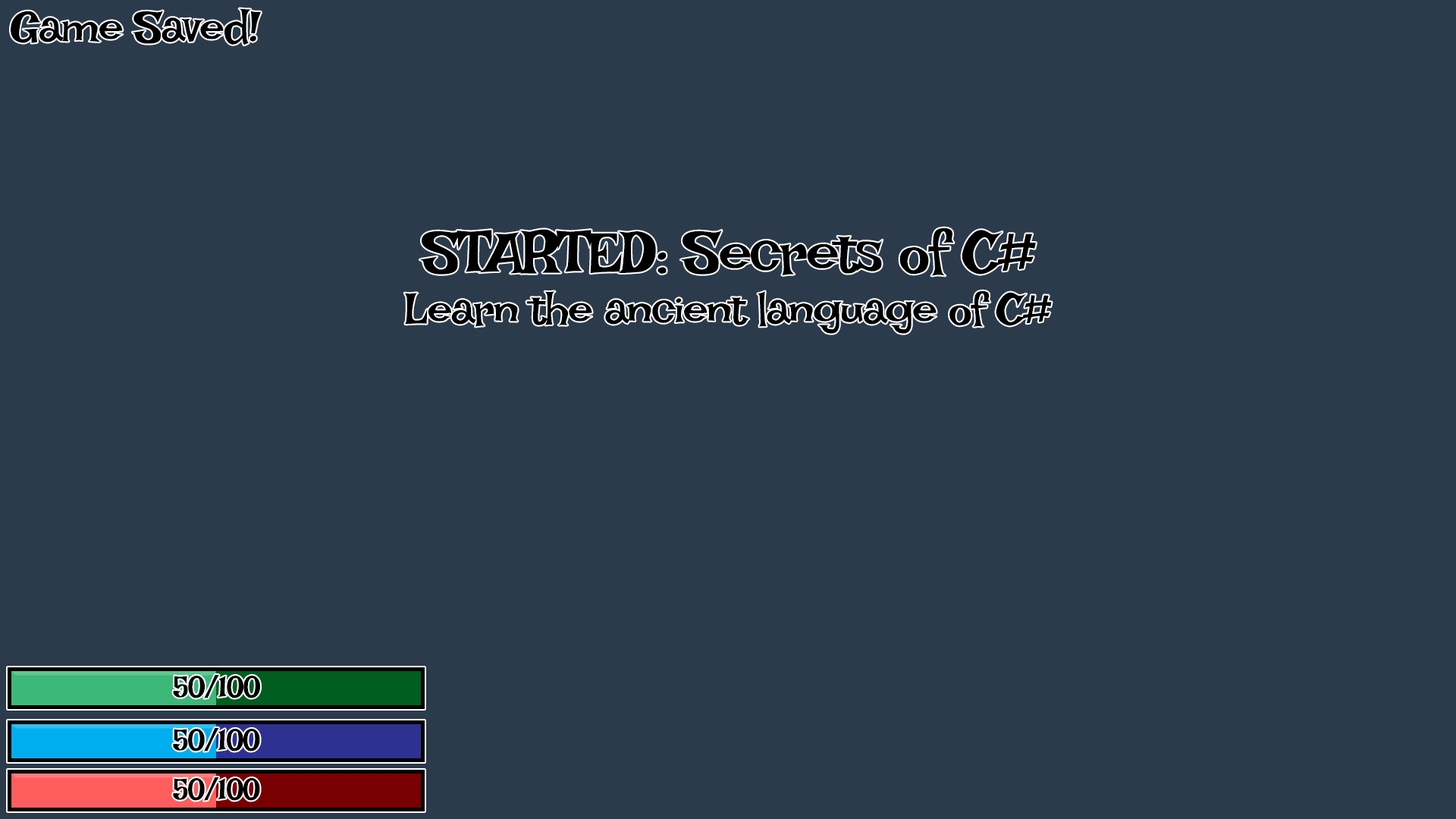
<style>
.page{position:relative;width:1456px;height:819px;background:#2b3b4c}
.page>*{position:absolute;margin:0}
.t1{font:45.5px "IrishGrover";letter-spacing:-0.04em;color:#000000}
.t2{font:60.7px "IrishGrover";letter-spacing:-0.04em;color:#000000}
.t3{font:31.1px "IrishGrover";letter-spacing:-0.04em;color:#000000}
</style>
<div class="page">
<p class="t1" style="left:11px;top:8px;width:250px;height:37px">Game Saved!</p>
<p class="t2" style="left:419px;top:227px;width:617px;height:49px">STARTED: Secrets of C#</p>
<p class="t1" style="left:404px;top:290px;width:648px;height:44px">Learn the ancient language of C#</p>
<p class="t3" style="left:173px;top:675px;width:87px;height:23px">50/100</p>
<p class="t3" style="left:173px;top:728px;width:87px;height:23px">50/100</p>
<p class="t3" style="left:173px;top:777px;width:87px;height:24px">50/100</p>
</div>
